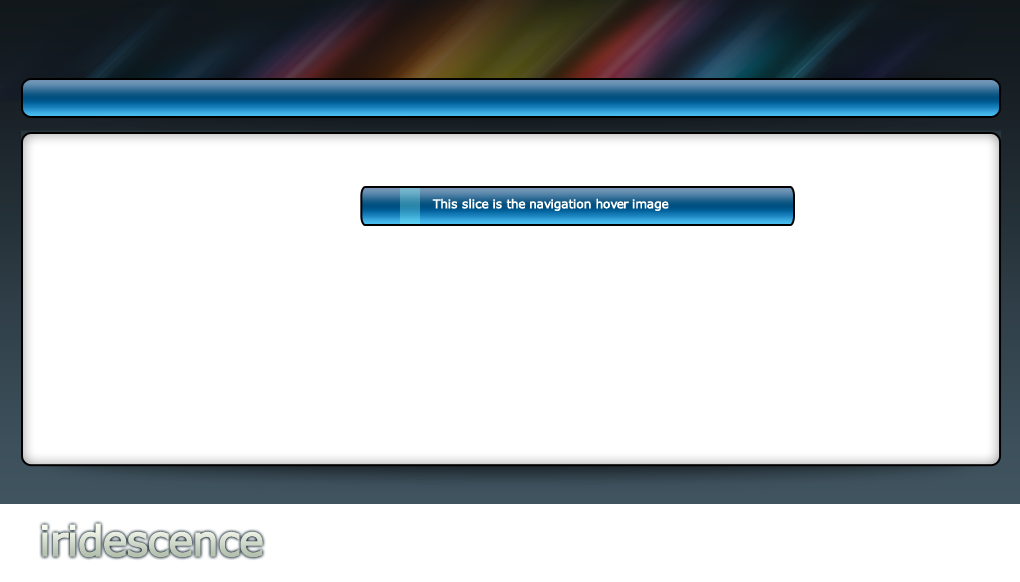
<style>
.page{position:relative;width:1020px;height:582px;background:#ffffff}
.page>*{position:absolute;margin:0}
.t1{font:12px "Verdana";letter-spacing:-0.05em;color:#fffffe;font-weight:bold}
</style>
<div class="page">
<p class="t1" style="left:432px;top:198px;width:237px;height:13px">This slice is the navigation hover image</p>
</div>
